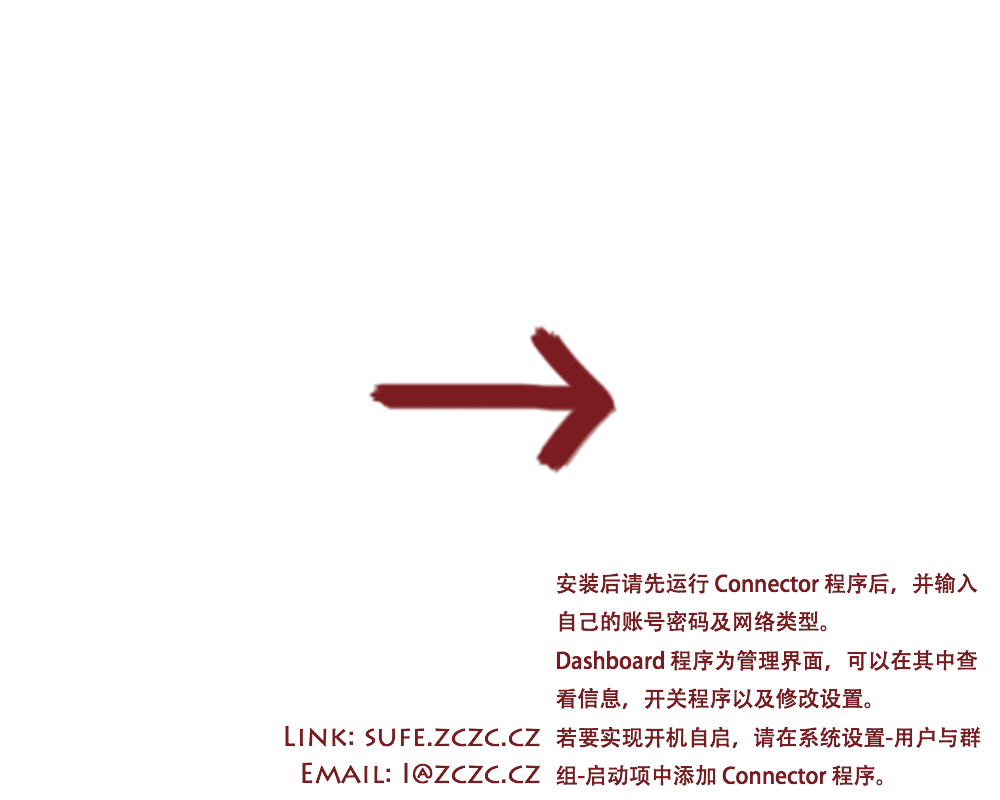
<style>
.page{position:relative;width:1000px;height:800px;background:#ffffff}
.page>*{position:absolute;margin:0}
.t1{font:22px "AdobeHeitiStd-Regular";color:#7b1d20}
.t2{font:28px "LithosPro-Regular";color:#7b1d20}
</style>
<div class="page">
<p class="t1" style="left:556px;top:572px;width:425px;height:214px">安装后请先运行 Connector 程序后，并输入自己的账号密码及网络类型。<br>Dashboard 程序为管理界面，可以在其中查看信息，开关程序以及修改设置。<br>若要实现开机自启，请在系统设置-用户与群组-启动项中添加 Connector 程序。</p>
<p class="t2" style="left:285px;top:725px;width:256px;height:22px">Link: sufe.zczc.cz</p>
<p class="t2" style="left:302px;top:762px;width:239px;height:22px">Email: I@zczc.cz</p>
</div>
